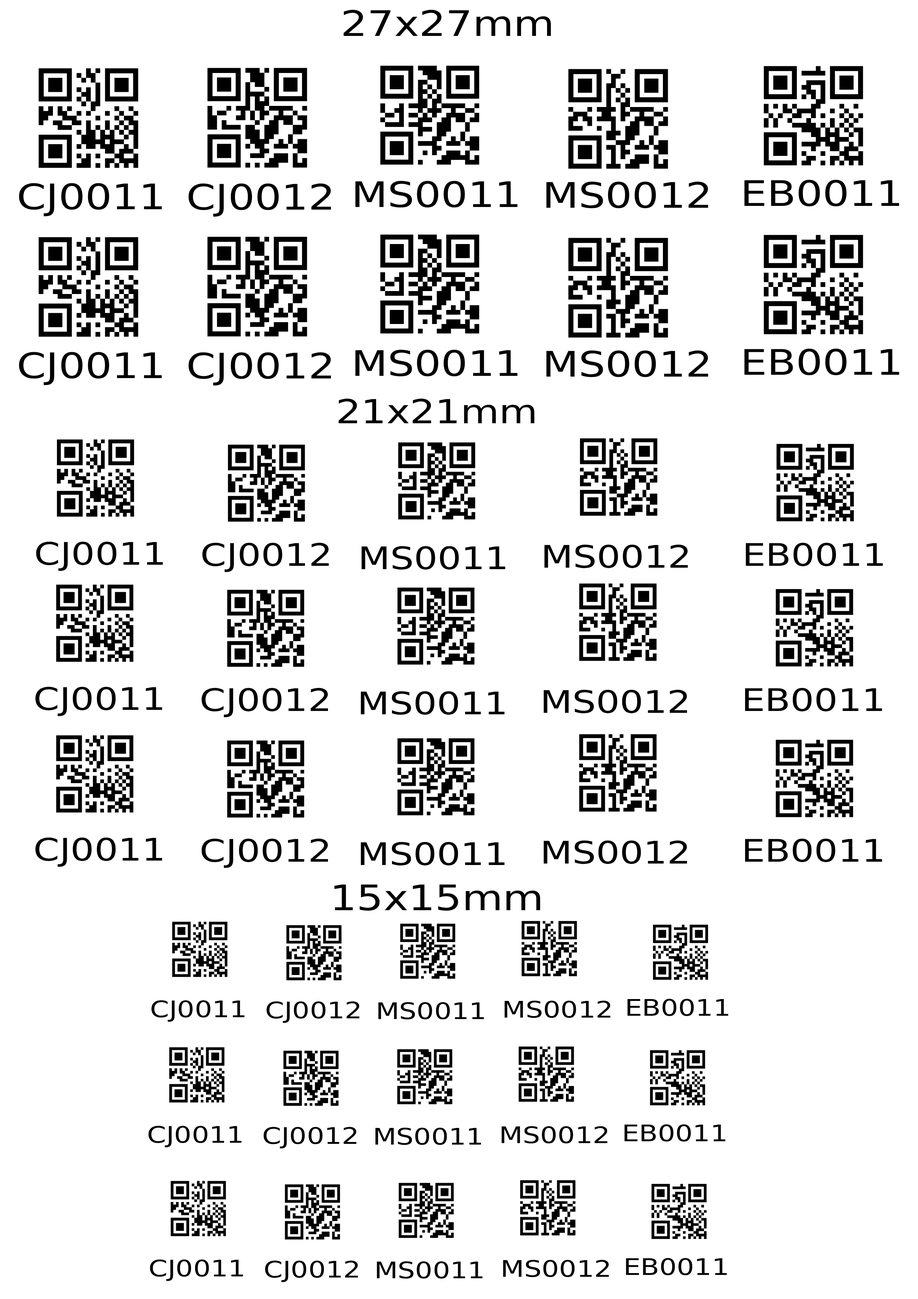
<style>
.page{position:relative;width:918px;height:1299px;background:#ffffff}
.page>*{position:absolute;margin:0}
.t1{font:35.1px "DejaVuSans";color:#000000;scale:1.2 1}
.t2{font:33.1px "DejaVuSans";color:#000000;scale:1.2 1}
.t3{font:31.1px "DejaVuSans";color:#000000;scale:1.2 1}
.t4{font:22.9px "DejaVuSans";color:#000000;scale:1.2 1}
</style>
<div class="page">
<p class="t1" style="left:344px;top:10px;width:207px;height:26px">27x27mm</p>
<p class="t1" style="left:19px;top:183px;width:143px;height:33px">CJ0011</p>
<p class="t1" style="left:188px;top:183px;width:143px;height:34px">CJ0012</p>
<p class="t1" style="left:355px;top:181px;width:163px;height:27px">MS0011</p>
<p class="t1" style="left:546px;top:181px;width:162px;height:27px">MS0012</p>
<p class="t1" style="left:745px;top:180px;width:154px;height:27px">EB0011</p>
<p class="t1" style="left:19px;top:352px;width:143px;height:33px">CJ0011</p>
<p class="t1" style="left:188px;top:352px;width:143px;height:33px">CJ0012</p>
<p class="t1" style="left:355px;top:349px;width:163px;height:28px">MS0011</p>
<p class="t1" style="left:546px;top:350px;width:162px;height:27px">MS0012</p>
<p class="t1" style="left:745px;top:348px;width:154px;height:27px">EB0011</p>
<p class="t2" style="left:338px;top:398px;width:197px;height:25px">21x21mm</p>
<p class="t3" style="left:36px;top:541px;width:127px;height:30px">CJ0011</p>
<p class="t3" style="left:202px;top:542px;width:127px;height:30px">CJ0012</p>
<p class="t3" style="left:361px;top:546px;width:144px;height:24px">MS0011</p>
<p class="t3" style="left:544px;top:544px;width:144px;height:24px">MS0012</p>
<p class="t3" style="left:746px;top:542px;width:137px;height:24px">EB0011</p>
<p class="t3" style="left:35px;top:686px;width:127px;height:30px">CJ0011</p>
<p class="t3" style="left:201px;top:688px;width:127px;height:29px">CJ0012</p>
<p class="t3" style="left:543px;top:689px;width:145px;height:24px">MS0012</p>
<p class="t3" style="left:745px;top:688px;width:137px;height:24px">EB0011</p>
<p class="t3" style="left:361px;top:691px;width:144px;height:24px">MS0011</p>
<p class="t3" style="left:35px;top:837px;width:127px;height:30px">CJ0011</p>
<p class="t3" style="left:201px;top:838px;width:127px;height:30px">CJ0012</p>
<p class="t3" style="left:361px;top:842px;width:144px;height:24px">MS0011</p>
<p class="t3" style="left:543px;top:840px;width:145px;height:24px">MS0012</p>
<p class="t3" style="left:745px;top:838px;width:137px;height:24px">EB0011</p>
<p class="t1" style="left:334px;top:884px;width:207px;height:27px">15x15mm</p>
<p class="t4" style="left:151px;top:1000px;width:94px;height:22px">CJ0011</p>
<p class="t4" style="left:267px;top:1001px;width:92px;height:22px">CJ0012</p>
<p class="t4" style="left:378px;top:1002px;width:106px;height:17px">MS0011</p>
<p class="t4" style="left:505px;top:1000px;width:105px;height:18px">MS0012</p>
<p class="t4" style="left:628px;top:998px;width:101px;height:18px">EB0011</p>
<p class="t4" style="left:148px;top:1125px;width:94px;height:22px">CJ0011</p>
<p class="t4" style="left:264px;top:1127px;width:93px;height:21px">CJ0012</p>
<p class="t4" style="left:375px;top:1127px;width:106px;height:18px">MS0011</p>
<p class="t4" style="left:502px;top:1126px;width:106px;height:17px">MS0012</p>
<p class="t4" style="left:625px;top:1124px;width:101px;height:17px">EB0011</p>
<p class="t4" style="left:150px;top:1259px;width:93px;height:22px">CJ0011</p>
<p class="t4" style="left:265px;top:1260px;width:93px;height:22px">CJ0012</p>
<p class="t4" style="left:377px;top:1261px;width:106px;height:17px">MS0011</p>
<p class="t4" style="left:503px;top:1259px;width:106px;height:18px">MS0012</p>
<p class="t4" style="left:626px;top:1258px;width:101px;height:17px">EB0011</p>
</div>
